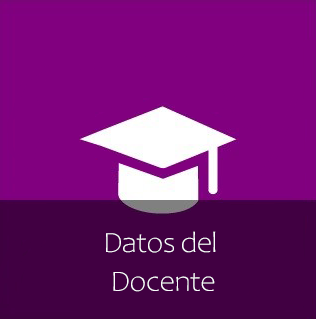
<style>
.page{position:relative;width:316px;height:319px;background:#81007f}
.page>*{position:absolute;margin:0}
.t1{font:29.5px/38.7px "Candara-Light";letter-spacing:-0.04em;color:#fafcfd;scale:1.08 1}
</style>
<div class="page">
<p class="t1" style="left:106px;top:231px;width:110px;height:61px;text-align:center">Datos del <br>Docente</p>
</div>
